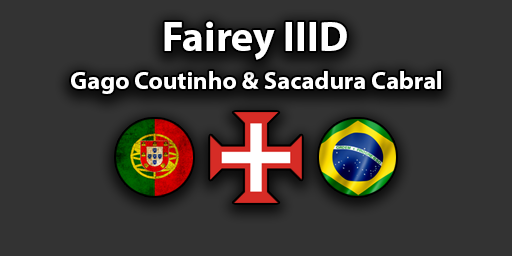
<style>
.page{position:relative;width:512px;height:256px;background:#333333}
.page>*{position:absolute;margin:0}
.t1{font:41.6px "MyriadHebrew-Bold";color:#ffffff}
.t2{font:24.6px "MyriadHebrew-Bold";color:#ffffff}
</style>
<div class="page">
<p class="t1" style="left:164px;top:21px;width:183px;height:39px">Fairey IIID</p>
<p class="t2" style="left:71px;top:71px;width:370px;height:23px">Gago Coutinho &amp; Sacadura Cabral</p>
</div>
